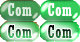
<style>
.page{position:relative;width:80px;height:42px}
.page>*{position:absolute;margin:0}
.t1{font:18px "Rockwell-Condensed";letter-spacing:0.025em;color:#ddece1}
.t2{font:18px "Rockwell-Condensed";letter-spacing:0.025em;color:#ffffff}
.t3{font:18px "Rockwell-Condensed";letter-spacing:0.025em}
</style>
<div class="page">
<p class="t1" style="left:8px;top:3px;width:24px;height:13px">Com</p>
<p class="t2" style="left:48px;top:3px;width:24px;height:13px">Com</p>
<p class="t3" style="left:8px;top:25px;width:24px;height:13px">Com</p>
<p class="t3" style="left:48px;top:25px;width:24px;height:13px">Com</p>
</div>
